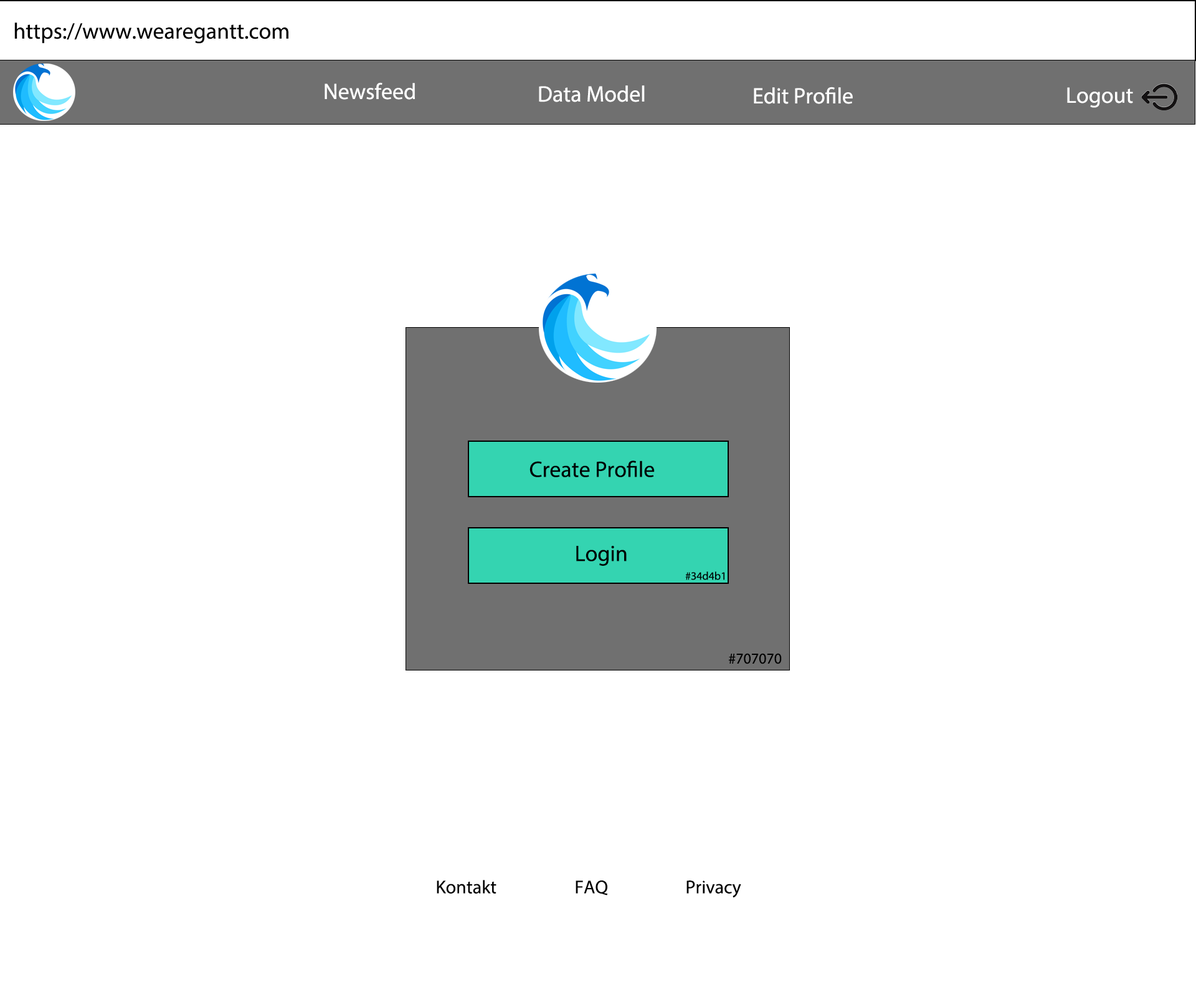
<style>
.page{position:relative;width:1196px;height:997px;background:#ffffff}
.page>*{position:absolute;margin:0}
.t1{font:22.4px "MyriadPro-Regular";color:#000000}
.t2{font:22.4px "MyriadPro-Regular";color:#ffffff}
.t3{font:11.2px "MyriadPro-Regular";color:#000000}
.t4{font:15px "MyriadPro-Regular";color:#000000}
.t5{font:18.7px "MyriadPro-Regular";color:#000000}
</style>
<div class="page">
<p class="t1" style="left:14px;top:22px;width:274px;height:22px">https://www.wearegantt.com</p>
<p class="t2" style="left:325px;top:82px;width:90px;height:18px">Newsfeed</p>
<p class="t2" style="left:539px;top:85px;width:106px;height:17px">Data Model</p>
<p class="t2" style="left:754px;top:87px;width:99px;height:17px">Edit Profile</p>
<p class="t2" style="left:1067px;top:87px;width:66px;height:21px">Logout</p>
<p class="t1" style="left:530px;top:460px;width:125px;height:17px">Create Profile</p>
<p class="t1" style="left:576px;top:546px;width:51px;height:20px">Login</p>
<p class="t3" style="left:685px;top:571px;width:40px;height:9px">#34d4b1</p>
<p class="t4" style="left:729px;top:653px;width:53px;height:11px">#707070</p>
<p class="t5" style="left:437px;top:880px;width:60px;height:13px">Kontakt</p>
<p class="t5" style="left:576px;top:880px;width:32px;height:15px">FAQ</p>
<p class="t5" style="left:687px;top:880px;width:54px;height:18px">Privacy</p>
</div>
